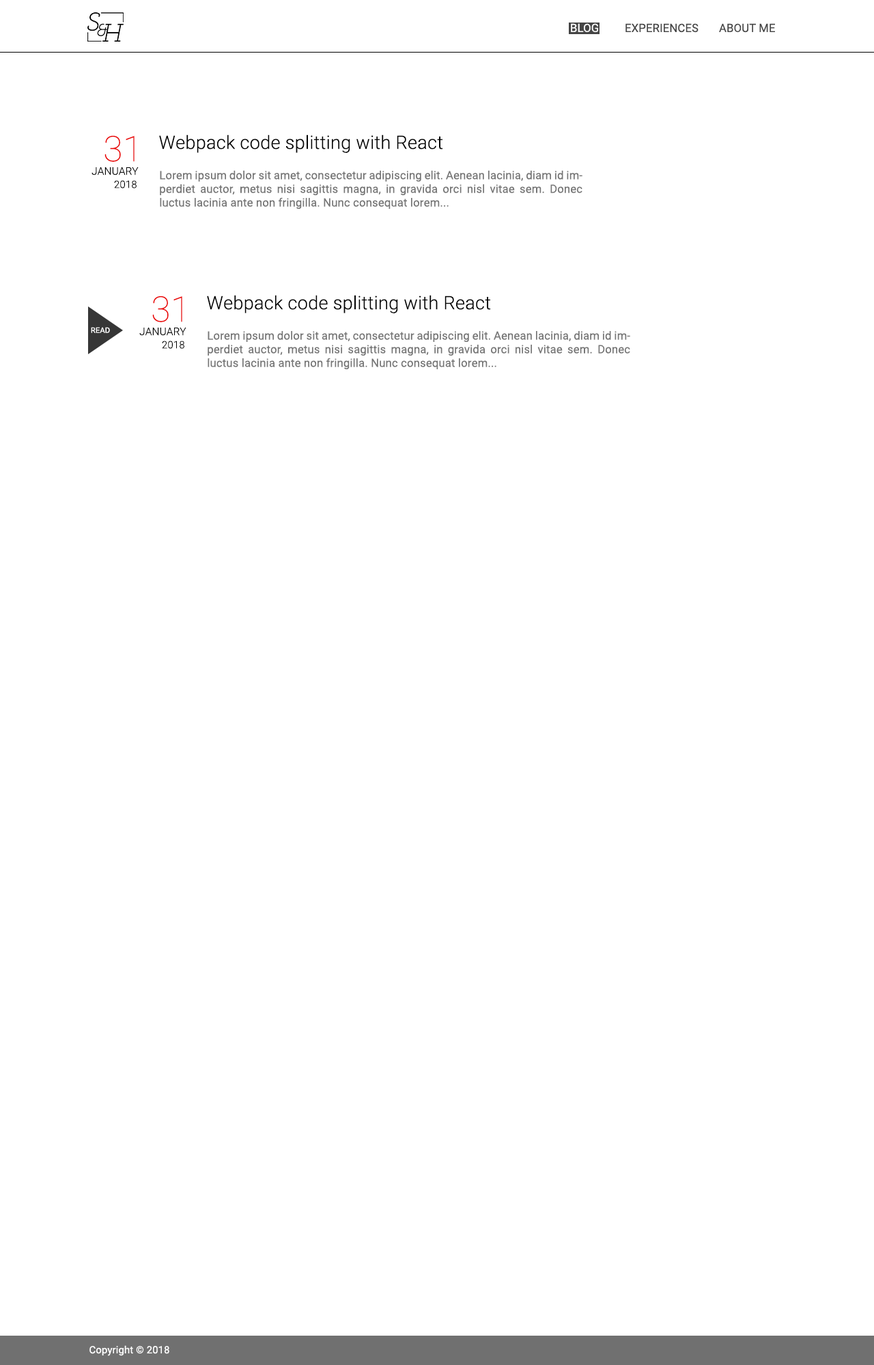
<style>
.page{position:relative;width:874px;height:1365px;background:#ffffff}
.page>*{position:absolute;margin:0}
.t1{font:11.4px "Roboto-Regular";letter-spacing:0.01em;color:#fefefe}
.t2{font:11.4px "Roboto-Regular";letter-spacing:0.01em;color:#454545}
.t3{font:35.3px "Roboto-Thin";letter-spacing:0.01em;color:#ea0000}
.t4{font:18.5px "Roboto-Light";letter-spacing:0.01em;color:#000000}
.t5{font:10.6px "Roboto-Light";letter-spacing:0.01em;color:#000000}
.t6{font:11.4px "Roboto-Regular";letter-spacing:0.01em;color:#757575}
.t7{font:10.3px "Roboto-Light";letter-spacing:0.01em;color:#000000}
.t8{font:7.6px "Roboto-Regular";letter-spacing:0.01em;color:#ffffff}
.t9{font:10.1px "Roboto-Regular";letter-spacing:0.01em;color:#ffffff}
</style>
<div class="page">
<p class="t1" style="left:571px;top:23px;width:27px;height:10px">BLOG</p>
<p class="t2" style="left:625px;top:23px;width:73px;height:10px">EXPERIENCES</p>
<p class="t2" style="left:719px;top:23px;width:56px;height:10px">ABOUT ME</p>
<p class="t3" style="left:104px;top:135px;width:30px;height:27px">31</p>
<p class="t4" style="left:159px;top:134px;width:284px;height:19px">Webpack code splitting with React</p>
<p class="t5" style="left:91px;top:167px;width:48px;height:8px">JANUARY</p>
<p class="t6" style="left:160px;top:171px;width:422px;height:38px;text-align:justify">Lorem ipsum dolor sit amet, consectetur adipiscing elit. Aenean lacinia, diam id imperdiet auctor, metus nisi sagittis magna, in gravida orci nisl vitae sem. Donec luctus lacinia ante non fringilla. Nunc consequat lorem...</p>
<p class="t7" style="left:114px;top:180px;width:22px;height:8px">2018</p>
<p class="t3" style="left:152px;top:296px;width:30px;height:26px">31</p>
<p class="t4" style="left:207px;top:295px;width:284px;height:18px">Webpack code splitting with React</p>
<p class="t8" style="left:91px;top:327px;width:19px;height:6px">READ</p>
<p class="t5" style="left:139px;top:328px;width:47px;height:8px">JANUARY</p>
<p class="t7" style="left:162px;top:341px;width:22px;height:8px">2018</p>
<p class="t6" style="left:207px;top:331px;width:423px;height:38px;text-align:justify">Lorem ipsum dolor sit amet, consectetur adipiscing elit. Aenean lacinia, diam id imperdiet auctor, metus nisi sagittis magna, in gravida orci nisl vitae sem. Donec luctus lacinia ante non fringilla. Nunc consequat lorem...</p>
<p class="t9" style="left:89px;top:1345px;width:80px;height:11px">Copyright © 2018</p>
</div>
